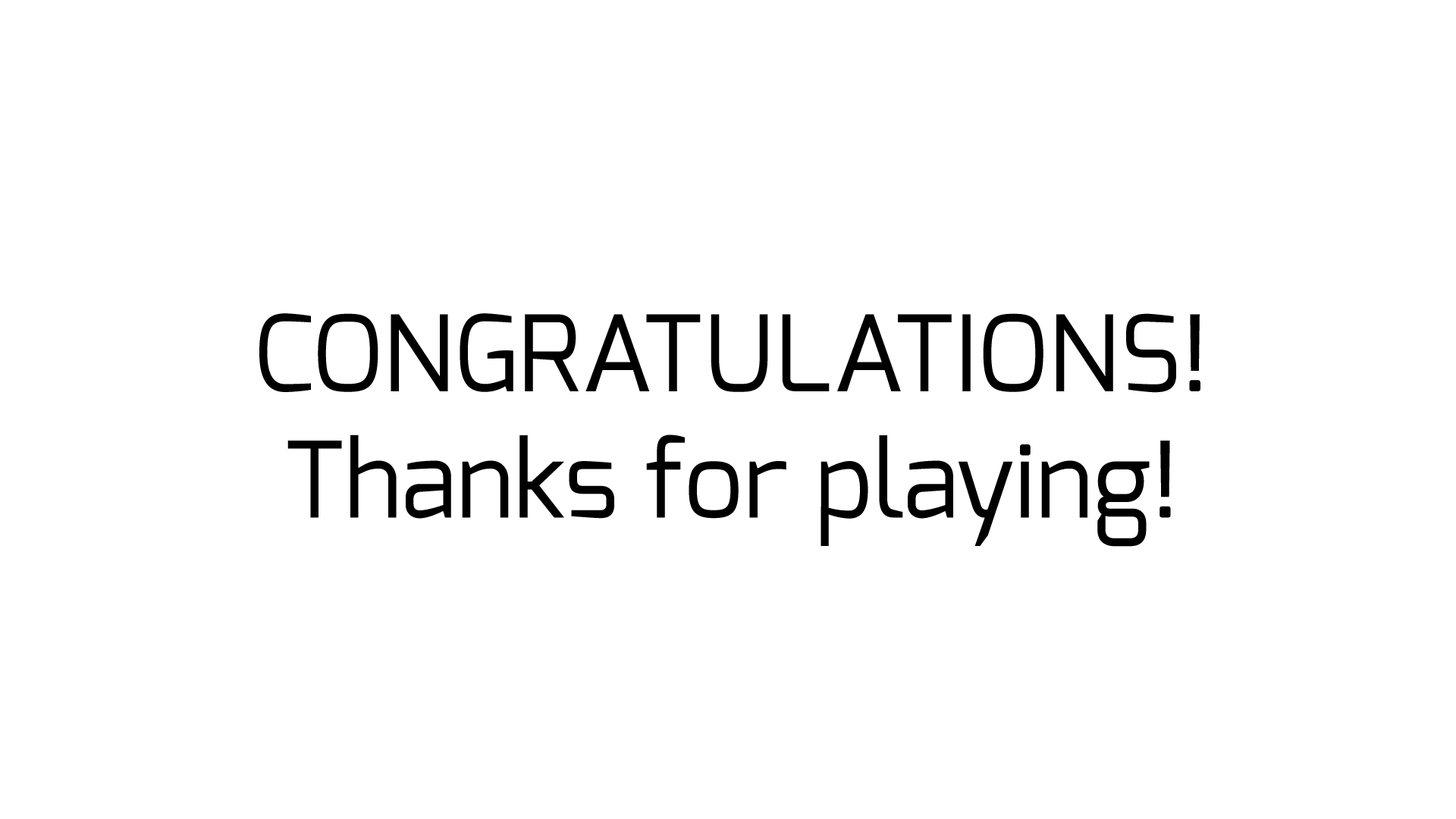
<style>
.page{position:relative;width:1456px;height:819px;background:#ffffff}
.page>*{position:absolute;margin:0}
.t1{font:105.2px "Exo-Regular";color:#000000}
</style>
<div class="page">
<p class="t1" style="left:259px;top:313px;width:941px;height:234px;text-align:center">CONGRATULATIONS!<br>Thanks for playing!</p>
</div>
